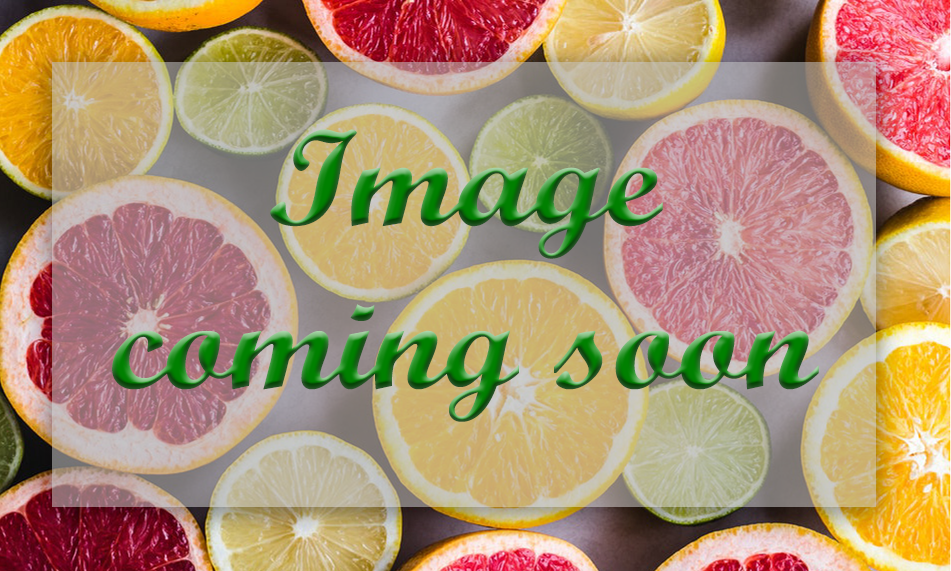
<style>
.page{position:relative;width:951px;height:571px}
.page>*{position:absolute;margin:0}
.t1{font:136px "ScriptMTBold";scale:1.1 1}
</style>
<div class="page">
<p class="t1" style="left:112px;top:129px;width:707px;height:293px;text-align:center">Image coming soon</p>
</div>
